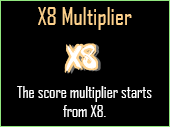
<style>
.page{position:relative;width:170px;height:127px;background:#000000}
.page>*{position:absolute;margin:0}
.t1{font:24px "AgencyFB-Reg";color:#ffd28c}
.t2{font:16px "AgencyFB-Reg";color:#ffffff}
</style>
<div class="page">
<p class="t1" style="left:38px;top:7px;width:94px;height:23px">X8 Multiplier</p>
<p class="t2" style="left:17px;top:86px;width:135px;height:31px;text-align:center">The score multiplier starts from X8.</p>
</div>
